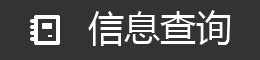
<style>
.page{position:relative;width:260px;height:60px;background:#333333}
.page>*{position:absolute;margin:0}
.t1{font:36px "MicrosoftYaHei";color:#ffffff}
</style>
<div class="page">
<p class="t1" style="left:88px;top:10px;width:143px;height:36px">信息查询</p>
</div>
